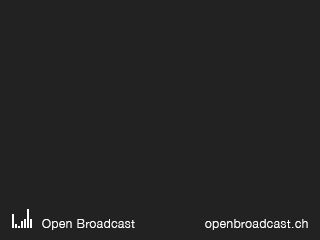
<style>
.page{position:relative;width:320px;height:240px;background:#222222}
.page>*{position:absolute;margin:0}
.t1{font:12px "HelveticaNeue-Light";letter-spacing:0.05em;color:#ffffff}
</style>
<div class="page">
<p class="t1" style="left:42px;top:219px;width:93px;height:11px">Open Broadcast</p>
<p class="t1" style="left:205px;top:219px;width:103px;height:11px">openbroadcast.ch</p>
</div>
